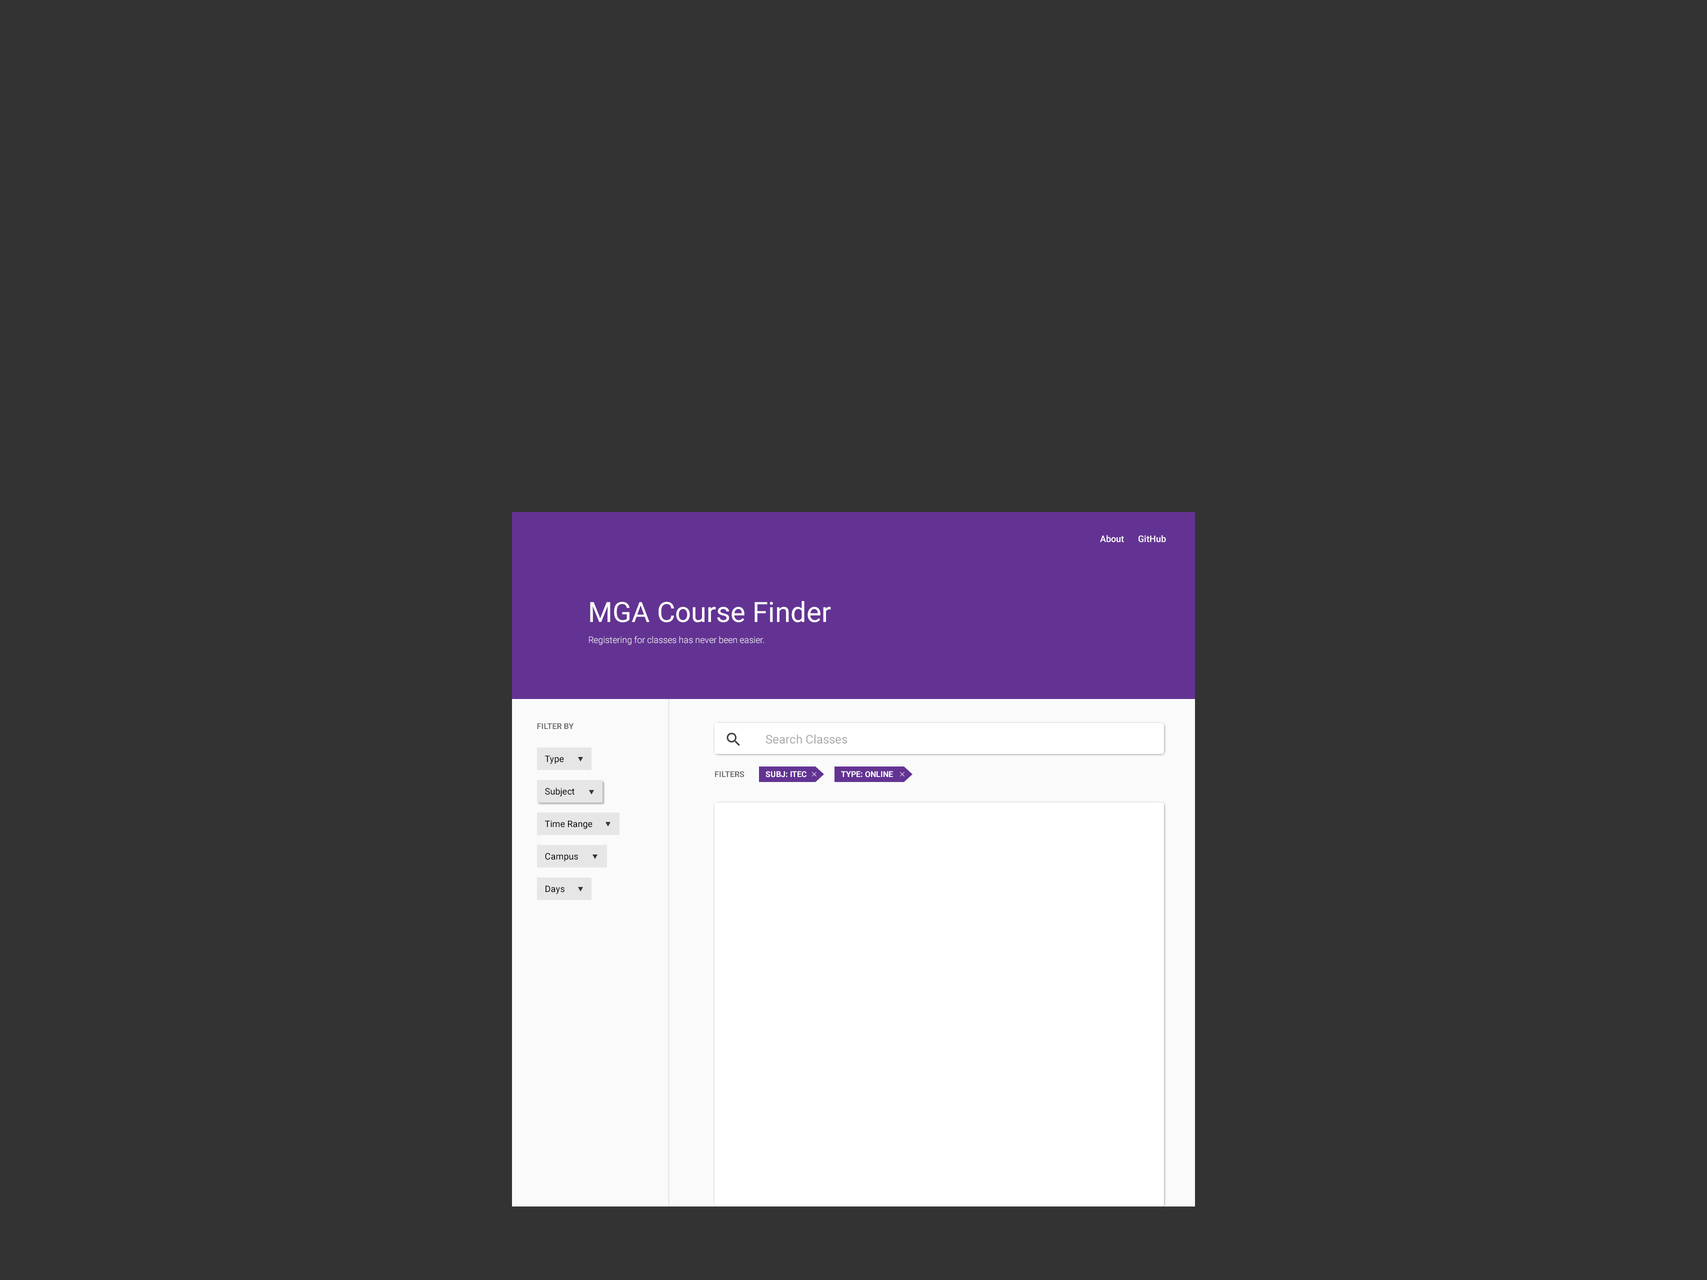
<style>
.page{position:relative;width:1707px;height:1280px;background:#333333}
.page>*{position:absolute;margin:0}
.t1{font:9px "Roboto-Medium";color:#fefefe}
.t2{font:28px "Roboto-Regular";color:#fefefe}
.t3{font:9px "Roboto-Light";color:#f7f7f7}
.t4{font:8px "Roboto-Bold";color:#737373}
.t5{font:12px "Roboto-Regular";color:#a8a8a8}
.t6{font:9px "Roboto-Regular";color:#000000}
.t7{font:8px "Roboto-Bold";color:#ffffff}
</style>
<div class="page">
<p class="t1" style="left:1100px;top:535px;width:66px;height:7px">About       GitHub</p>
<p class="t2" style="left:590px;top:601px;width:241px;height:21px">MGA Course Finder</p>
<p class="t3" style="left:589px;top:636px;width:175px;height:9px">Registering for classes has never been easier.</p>
<p class="t4" style="left:537px;top:723px;width:37px;height:6px">FILTER BY</p>
<p class="t5" style="left:766px;top:734px;width:82px;height:10px">Search Classes</p>
<p class="t6" style="left:545px;top:756px;width:19px;height:8px">Type</p>
<p class="t4" style="left:715px;top:771px;width:29px;height:7px">FILTERS</p>
<p class="t7" style="left:766px;top:771px;width:40px;height:7px">SUBJ: ITEC</p>
<p class="t7" style="left:841px;top:771px;width:52px;height:7px">TYPE: ONLINE</p>
<p class="t6" style="left:545px;top:788px;width:29px;height:8px">Subject</p>
<p class="t6" style="left:545px;top:820px;width:47px;height:9px">Time Range</p>
<p class="t6" style="left:545px;top:853px;width:33px;height:9px">Campus</p>
<p class="t6" style="left:546px;top:886px;width:18px;height:8px">Days</p>
</div>
